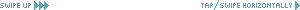
<style>
.page{position:relative;width:300px;height:10px;background:#ffffff}
.page>*{position:absolute;margin:0}
.t1{font:8px "FrucadeSmall";color:#5aa8b2}
</style>
<div class="page">
<p class="t1" style="left:0px;top:3px;width:31px;height:5px">Swipe up</p>
<p class="t1" style="left:201px;top:3px;width:12px;height:5px">TAP</p>
<p class="t1" style="left:220px;top:3px;width:72px;height:5px">Swipe horizontally</p>
</div>
